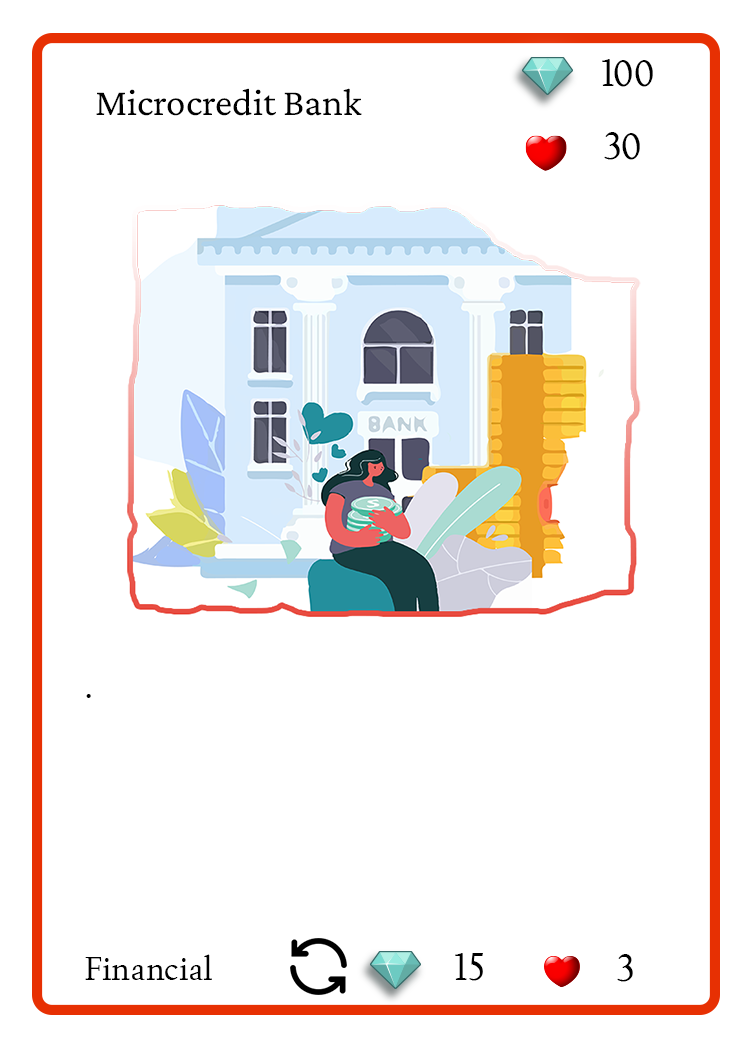
<style>
.page{position:relative;width:750px;height:1050px;background:#ffffff}
.page>*{position:absolute;margin:0}
.t1{font:37.5px "Joan-Regular";color:#000000;text-transform:uppercase}
.t2{font:38.9px "CrimsonPro-Regular";color:#000000}
.t3{font:33.3px "Joan-Regular";color:#000000}
</style>
<div class="page">
<p class="t1" style="left:602px;top:59px;width:51px;height:28px">100</p>
<p class="t2" style="left:96px;top:88px;width:266px;height:28px">Microcredit Bank</p>
<p class="t1" style="left:604px;top:132px;width:36px;height:28px">30</p>
<p class="t3" style="left:86px;top:694px;width:5px;height:4px">.</p>
<p class="t1" style="left:455px;top:953px;width:28px;height:28px">15</p>
<p class="t3" style="left:85px;top:954px;width:127px;height:26px">Financial</p>
<p class="t1" style="left:617px;top:954px;width:16px;height:28px">3</p>
</div>
